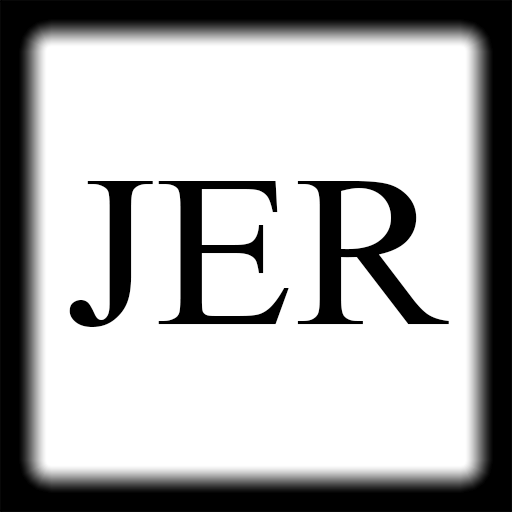
<style>
.page{position:relative;width:512px;height:512px;background:#ffffff}
.page>*{position:absolute;margin:0}
.t1{font:215px "TimesNewRomanPSMT";color:#000000;scale:1.07 1}
</style>
<div class="page">
<p class="t1" style="left:69px;top:181px;width:380px;height:146px">JER</p>
</div>
